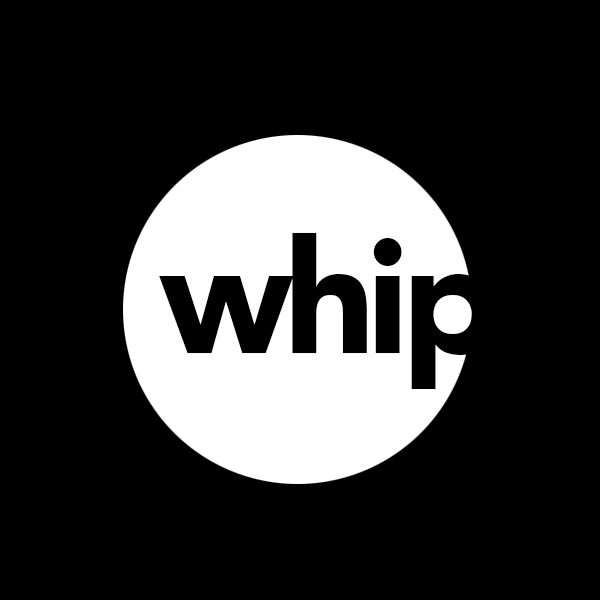
<style>
.page{position:relative;width:600px;height:600px;background:#000000}
.page>*{position:absolute;margin:0}
.t1{font:158.8px "Avenir-Black";letter-spacing:-0.05em;color:#000000}
</style>
<div class="page">
<p class="t1" style="left:159px;top:232px;width:409px;height:157px">whipz</p>
</div>
